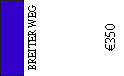
<style>
.page{position:relative;width:124px;height:76px;background:#ffffff}
.page>*{position:absolute;margin:0}
.t1{font:12px "AdobeDevanagari-Regular";color:#000000;scale:0.9 1}
.t2{font:14px "MyriadPro-Regular";color:#000000}
</style>
<div class="page">
<p class="t1" style="left:28px;top:5px;width:8px;height:65px;rotate:-90deg">BREITER WEG</p>
<p class="t2" style="left:105px;top:24px;width:10px;height:27px;rotate:-90deg">€350</p>
</div>
